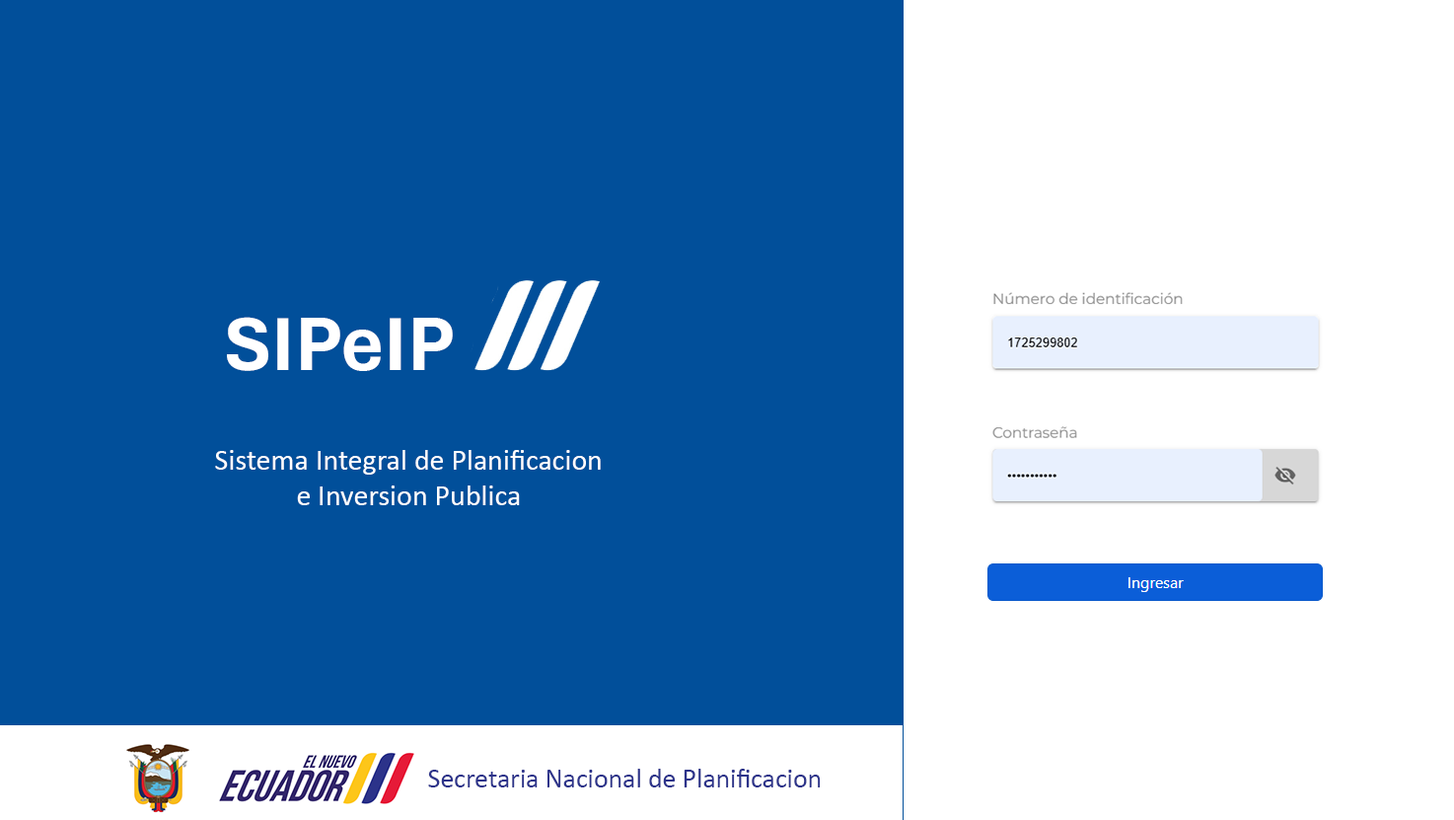
<style>
.page{position:relative;width:1454px;height:820px;background:#014f9a}
.page>*{position:absolute;margin:0}
.t1{font:79px "Aptos-Bold";color:#ffffff}
.t2{font:29.7px "Calibri";color:#ffffff}
.t3{font:27.3px "Calibri";color:#2c338a}
</style>
<div class="page">
<p class="t1" style="left:227px;top:317px;width:226px;height:54px">SIPeIP</p>
<p class="t2" style="left:215px;top:450px;width:386px;height:55px;text-align:center">Sistema Integral de Planificacion<br>e Inversion Publica</p>
<p class="t3" style="left:428px;top:769px;width:393px;height:18px">Secretaria Nacional de Planificacion</p>
</div>
